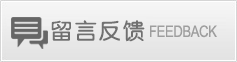
<style>
.page{position:relative;width:237px;height:62px}
.page>*{position:absolute;margin:0}
.t1{font:22px "ZhunYuan";letter-spacing:0.1em;color:#707070}
.t2{font:16px "ArialNarrow";letter-spacing:-0.025em;color:#9e9e9e}
</style>
<div class="page">
<p class="t1" style="left:51px;top:20px;width:94px;height:22px">留言反馈</p>
<p class="t2" style="left:150px;top:25px;width:67px;height:13px">FEEDBACK</p>
</div>
